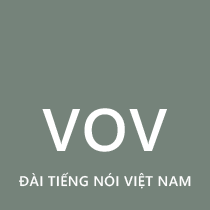
<style>
.page{position:relative;width:210px;height:210px;background:#75837a}
.page>*{position:absolute;margin:0}
.t1{font:60px "SegoeWP-Semibold";letter-spacing:0.025em;color:#ffffff}
.t2{font:14px "SegoeWP-Semibold";letter-spacing:0.025em;color:#fefefe}
</style>
<div class="page">
<p class="t1" style="left:42px;top:108px;width:125px;height:44px">VOV</p>
<p class="t2" style="left:19px;top:172px;width:172px;height:17px">ĐÀI TIẾNG NÓI VIỆT NAM</p>
</div>
